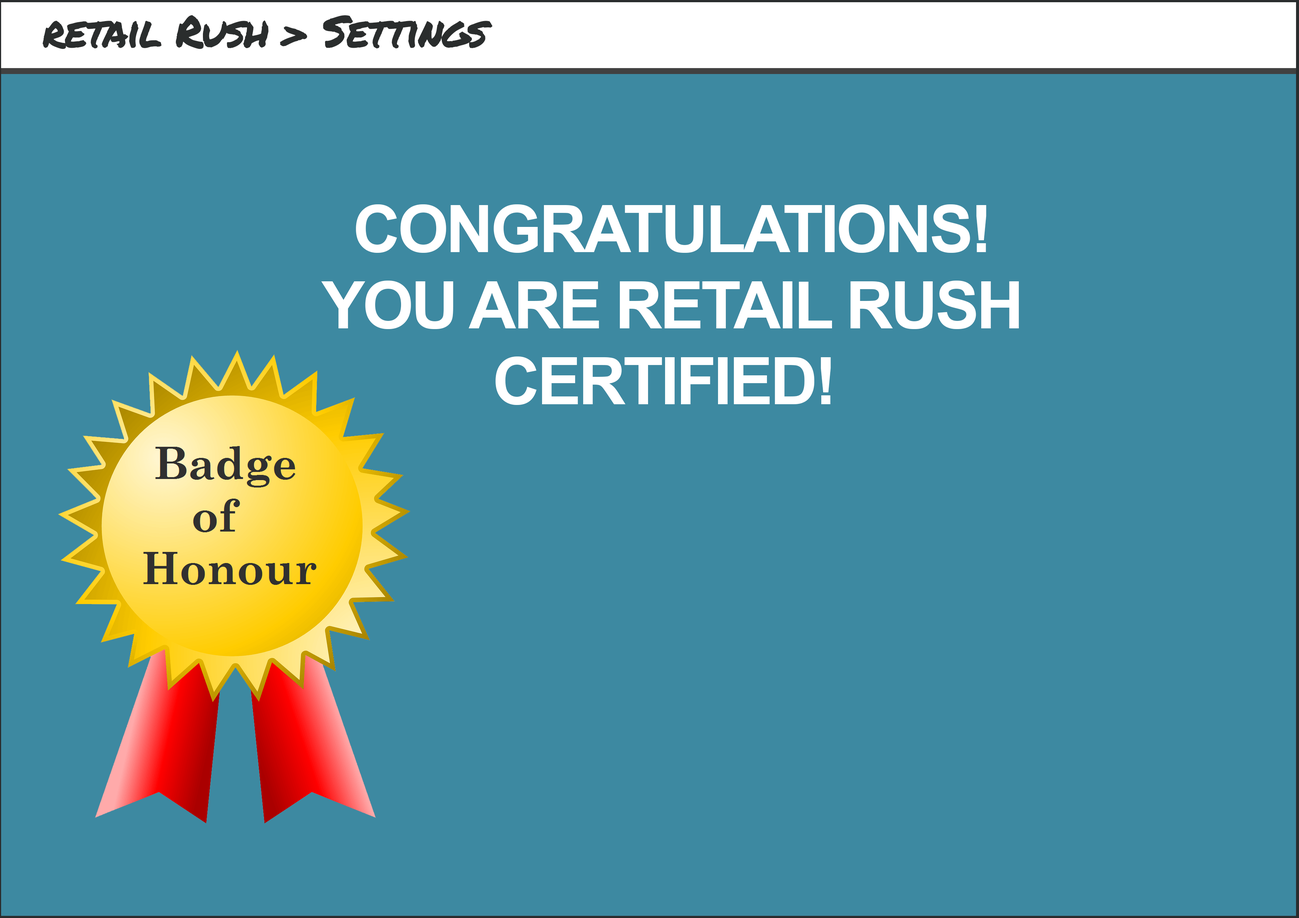
<style>
.page{position:relative;width:1299px;height:918px;background:#3d89a1}
.page>*{position:absolute;margin:0}
.t1{font:44px "PermanentMarker-Regular";letter-spacing:-0.04em;color:#2a2d2d}
.t2{font:65.6px/38.1px "Arial-BoldMT";letter-spacing:-0.04em;color:#ffffff}
</style>
<div class="page">
<p class="t1" style="left:43px;top:15px;width:449px;height:34px">retail Rush &gt; Settings</p>
<p class="t2" style="left:321px;top:204px;width:698px;height:201px;text-align:center">CONGRATULATIONS!<br><br>YOU ARE RETAIL RUSH<br><br>CERTIFIED!</p>
</div>
